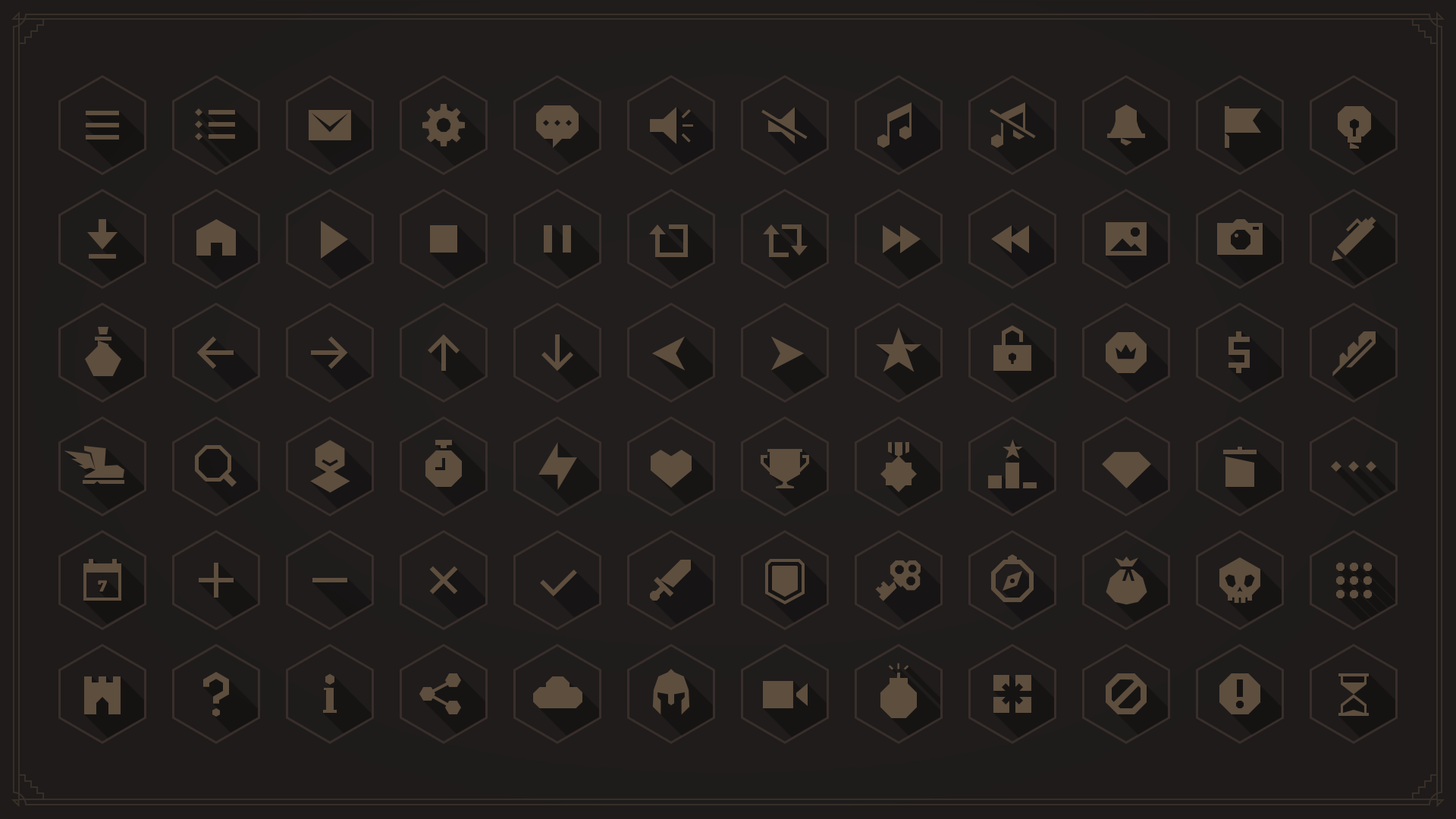
<style>
.page{position:relative;width:1456px;height:819px}
.page>*{position:absolute;margin:0}
.t1{font:15.2px "Montserrat-Bold";color:#5e4e3e;text-transform:uppercase}
</style>
<div class="page">
<p class="t1" style="left:98px;top:580px;width:9px;height:11px">7</p>
</div>
